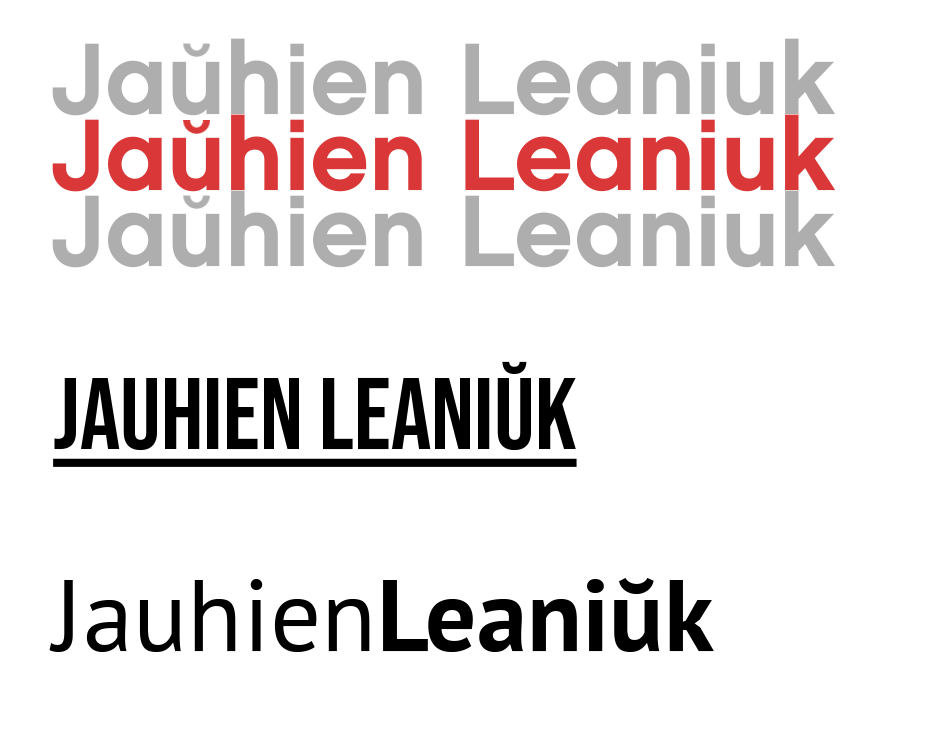
<style>
.page{position:relative;width:931px;height:749px;background:#ffffff}
.page>*{position:absolute;margin:0}
.t1{font:101.3px "Chalet-NewYorkNineteenEighty";color:#afaeae}
.t2{font:101.3px "Chalet-NewYorkNineteenEighty";color:#da3838}
.t3{font:101.3px "BebasNeue-Regular";color:#000000;text-decoration:underline}
.t4{font:101.3px "PTSans-Regular";color:#000000}
.t5{font:101.3px "PTSans-Bold";color:#000000}
</style>
<div class="page">
<p class="t1" style="left:52px;top:38px;width:784px;height:78px">Jauhien Leaniuk</p>
<p class="t2" style="left:52px;top:114px;width:784px;height:78px">Jauhien Leaniuk</p>
<p class="t1" style="left:52px;top:190px;width:784px;height:78px">Jauhien Leaniuk</p>
<p class="t3" style="left:53px;top:361px;width:524px;height:106px">Jauhien Leaniŭk</p>
<p class="t4" style="left:49px;top:578px;width:665px;height:74px">Jauhien<span class="t5">Leaniŭk</span></p>
</div>
